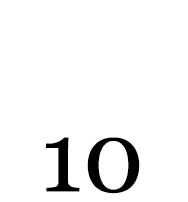
<style>
.page{position:relative;width:188px;height:202px;background:#ffffff}
.page>*{position:absolute;margin:0}
.t1{font:100px "Georgia";color:#000000}
</style>
<div class="page">
<p class="t1" style="left:46px;top:137px;width:94px;height:57px">10</p>
</div>
